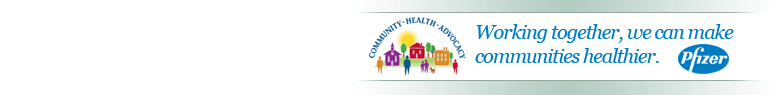
<style>
.page{position:relative;width:770px;height:95px;background:#ffffff}
.page>*{position:absolute;margin:0}
.t1{font:20px "Georgia-Italic";letter-spacing:-0.05em;color:#007cc2}
</style>
<div class="page">
<p class="t1" style="left:475px;top:24px;width:259px;height:39px">Working together, we can make<br>communities healthier.</p>
</div>
